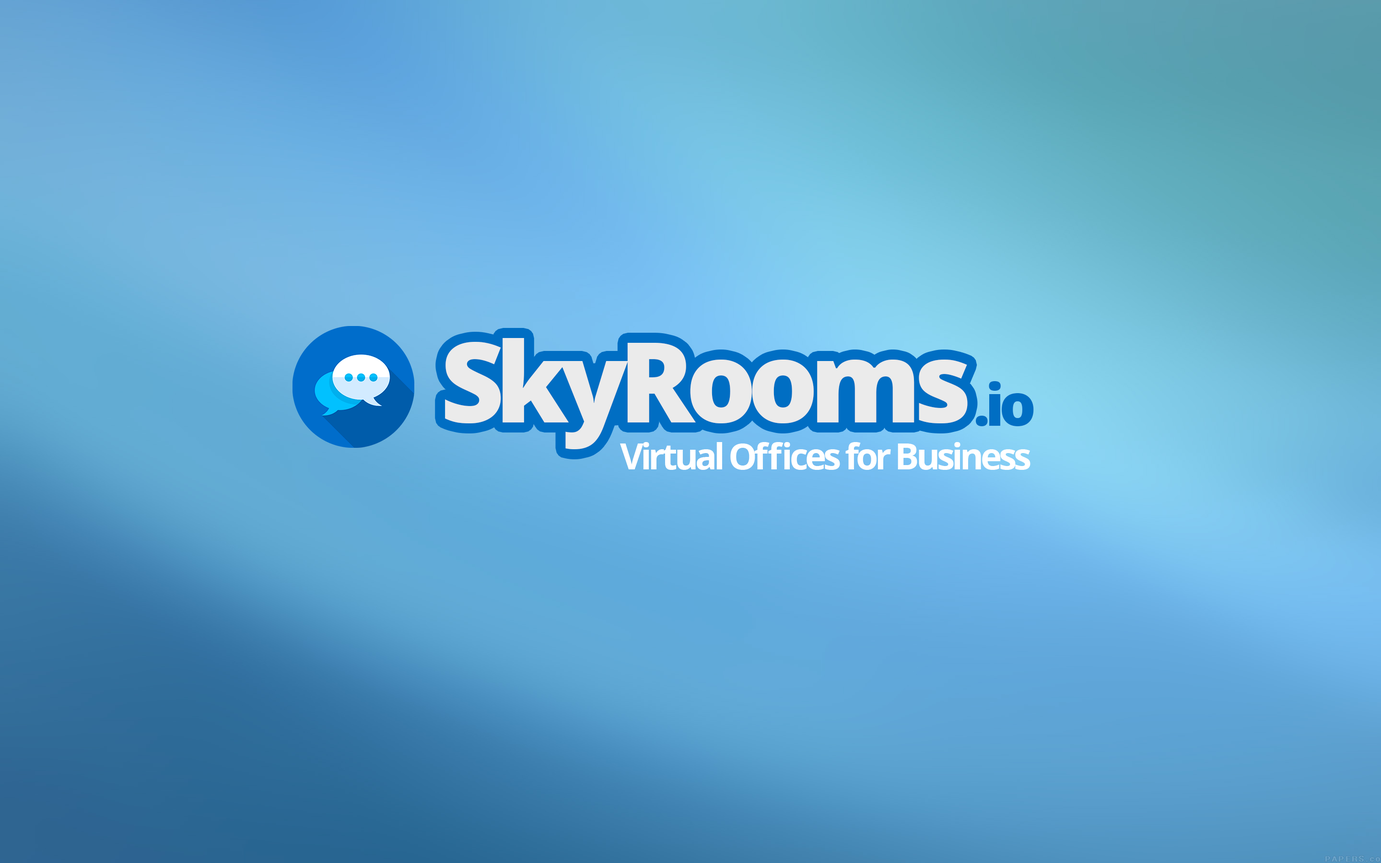
<style>
.page{position:relative;width:1381px;height:863px}
.page>*{position:absolute;margin:0}
.t1{font:111.5px "OpenSans-Extrabold";letter-spacing:-0.08em;color:#ebebeb}
.t2{font:57.5px "OpenSans-Extrabold";letter-spacing:-0.08em;color:#006ec3}
.t3{font:35.8px "OpenSans-Bold";letter-spacing:-0.08em;color:#ffffff}
</style>
<div class="page">
<p class="t1" style="left:445px;top:338px;width:523px;height:111px">SkyRooms</p>
<p class="t2" style="left:976px;top:381px;width:58px;height:45px">.io</p>
<p class="t3" style="left:620px;top:442px;width:411px;height:28px">Virtual Offices for Business</p>
</div>
